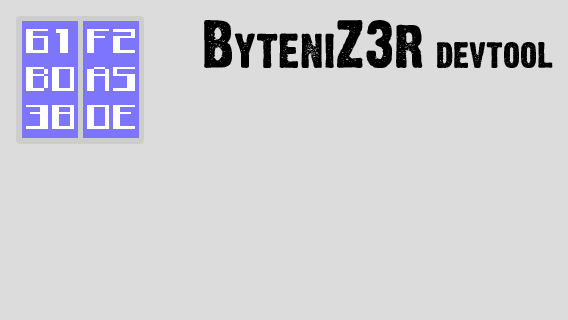
<style>
.page{position:relative;width:568px;height:320px;background:#dcdcdc}
.page>*{position:absolute;margin:0}
.t1{font:36px "DirtyHeadline";color:#000000}
.t2{font:60px "DirtyHeadline";color:#000000}
.t3{font:47.8px "DirtyHeadline";color:#000000}
</style>
<div class="page">
<p class="t1" style="left:204px;top:20px;width:349px;height:48px"><span class="t2">B</span><span class="t3">yteni</span><span class="t2">Z3r </span>devtool</p>
</div>
